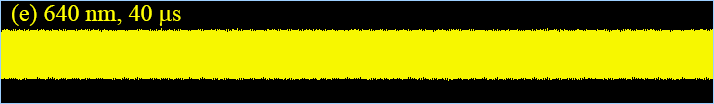
<style>
.page{position:relative;width:714px;height:104px;background:#000000}
.page>*{position:absolute;margin:0}
.t1{font:24px "TimesNewRomanPSMT";color:#ffff00}
.t2{font:24px "SymbolMT";color:#ffff00}
</style>
<div class="page">
<p class="t1" style="left:12px;top:4px;width:169px;height:22px">(e) 640 nm, 40 <span class="t2">m</span>s</p>
</div>
